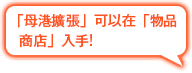
<style>
.page{position:relative;width:192px;height:73px;background:#ffffff}
.page>*{position:absolute;margin:0}
.t1{font:14px/20px "GothicMB101Pr6N-Medium";color:#fe5420}
</style>
<div class="page">
<p class="t1" style="left:18px;top:13px;width:159px;height:35px">「母港擴張」可以在「物品<br>  商店」入手!</p>
</div>
